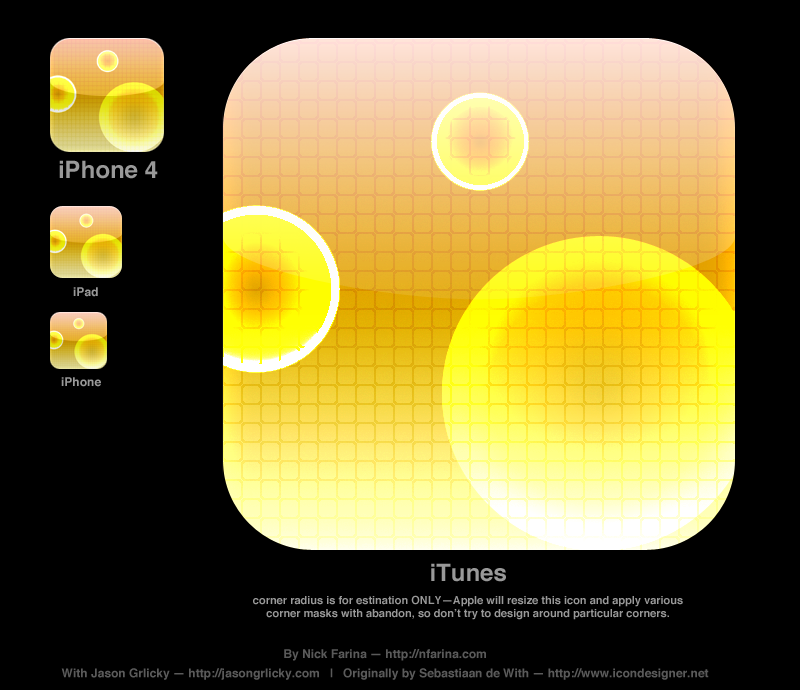
<style>
.page{position:relative;width:800px;height:690px;background:#000000}
.page>*{position:absolute;margin:0}
.t1{font:24px "Helvetica-Bold";color:#999999}
.t2{font:12px "Helvetica-Bold";color:#999999}
.t3{font:11px "Helvetica-Bold";color:#999999}
.t4{font:12px/19.1px "Helvetica-Bold";color:#5a5a5a}
</style>
<div class="page">
<p class="t1" style="left:59px;top:160px;width:99px;height:19px">iPhone 4</p>
<p class="t2" style="left:73px;top:287px;width:25px;height:10px">iPad</p>
<p class="t2" style="left:61px;top:377px;width:40px;height:10px">iPhone</p>
<p class="t3" style="left:253px;top:563px;width:430px;height:57px;text-align:center"><span class="t1">iTunes<br><br></span>corner radius is for estination ONLY—Apple will resize this icon and apply various<br>corner masks with abandon, so don’t try to design around particular corners.</p>
<p class="t4" style="left:61px;top:649px;width:648px;height:31px;text-align:center">By Nick Farina — http://nfarina.com<br>With Jason Grlicky — http://jasongrlicky.com   |   Originally by Sebastiaan de With — http://www.icondesigner.net</p>
</div>
